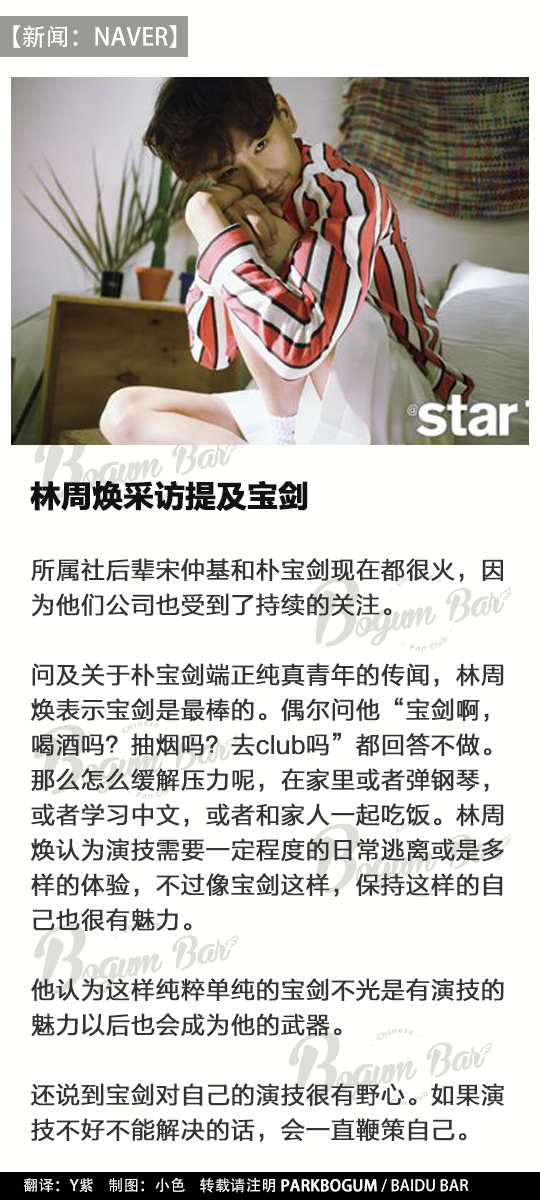
<style>
.page{position:relative;width:540px;height:1200px;background:#fffffd}
.page>*{position:absolute;margin:0}
.t1{font:24px "AdobeHeitiStd-Regular";color:#ffffff}
.t2{font:30px "MicrosoftYaHei-Bold";color:#121212;font-weight:bold}
.t3{font:24px/35px "FZLTHJW--GB1-0";color:#333333;font-weight:bold}
.t4{font:15.4px "AdobeHeitiStd-Regular";color:#ffffff}
.t5{font:15.4px "AdobeHeitiStd-Regular";color:#ffffff;font-weight:bold}
</style>
<div class="page">
<p class="t1" style="left:13px;top:25px;width:164px;height:23px">【新闻：NAVER】</p>
<p class="t2" style="left:30px;top:481px;width:278px;height:30px">林周焕采访提及宝剑</p>
<p class="t3" style="left:31px;top:558px;width:473px;height:584px">所属社后辈宋仲基和朴宝剑现在都很火，因为他们公司也受到了持续的关注。<br><br>问及关于朴宝剑端正纯真青年的传闻，林周焕表示宝剑是最棒的。偶尔问他“宝剑啊，喝酒吗？抽烟吗？去club吗”都回答不做。那么怎么缓解压力呢，在家里或者弹钢琴，或者学习中文，或者和家人一起吃饭。林周焕认为演技需要一定程度的日常逃离或是多样的体验，不过像宝剑这样，保持这样的自己也很有魅力。<br><br>他认为这样纯粹单纯的宝剑不光是有演技的魅力以后也会成为他的武器。<br><br>还说到宝剑对自己的演技很有野心。如果演技不好不能解决的话，会一直鞭策自己。</p>
<p class="t4" style="left:23px;top:1178px;width:446px;height:15px">翻译：Y紫    制图：小色    转载请注明 <span class="t5">PARKBOGUM </span>/ BAIDU BAR</p>
</div>
